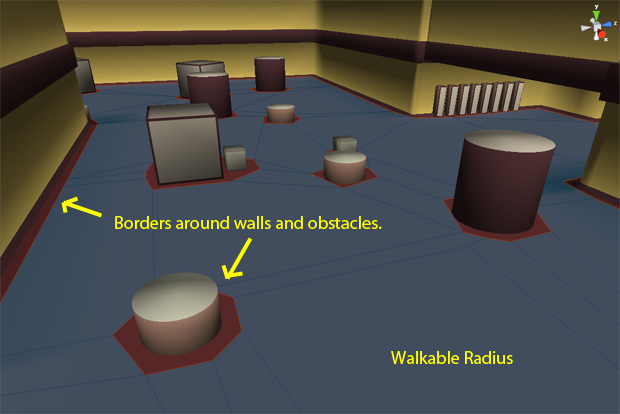
<style>
.page{position:relative;width:620px;height:414px;background:#414c5d}
.page>*{position:absolute;margin:0}
.t1{font:18px "MyriadPro-Regular";color:#ffff00}
</style>
<div class="page">
<p class="t1" style="left:115px;top:216px;width:267px;height:13px">Borders around walls and obstacles.</p>
<p class="t1" style="left:391px;top:351px;width:122px;height:13px">Walkable Radius</p>
</div>
